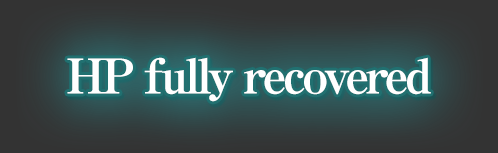
<style>
.page{position:relative;width:498px;height:153px}
.page>*{position:absolute;margin:0}
.t1{font:48px "RyuminPro-ExBold";letter-spacing:-0.08em;color:#ffffff}
</style>
<div class="page">
<p class="t1" style="left:67px;top:57px;width:364px;height:45px">HP fully recovered</p>
</div>
